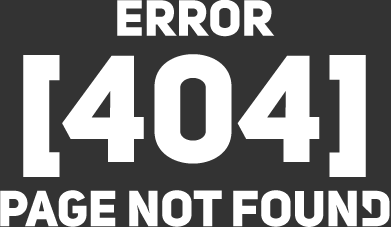
<style>
.page{position:relative;width:391px;height:227px;background:#333333}
.page>*{position:absolute;margin:0}
.t1{font:50px "DiscordLogoFont";color:#ffffff}
.t2{font:150px "DiscordLogoFont";color:#ffffff}
</style>
<div class="page">
<p class="t1" style="left:117px;top:0px;width:158px;height:37px">ERROR</p>
<p class="t2" style="left:23px;top:54px;width:343px;height:123px">[404]</p>
<p class="t1" style="left:0px;top:190px;width:390px;height:37px">Page not found</p>
</div>
